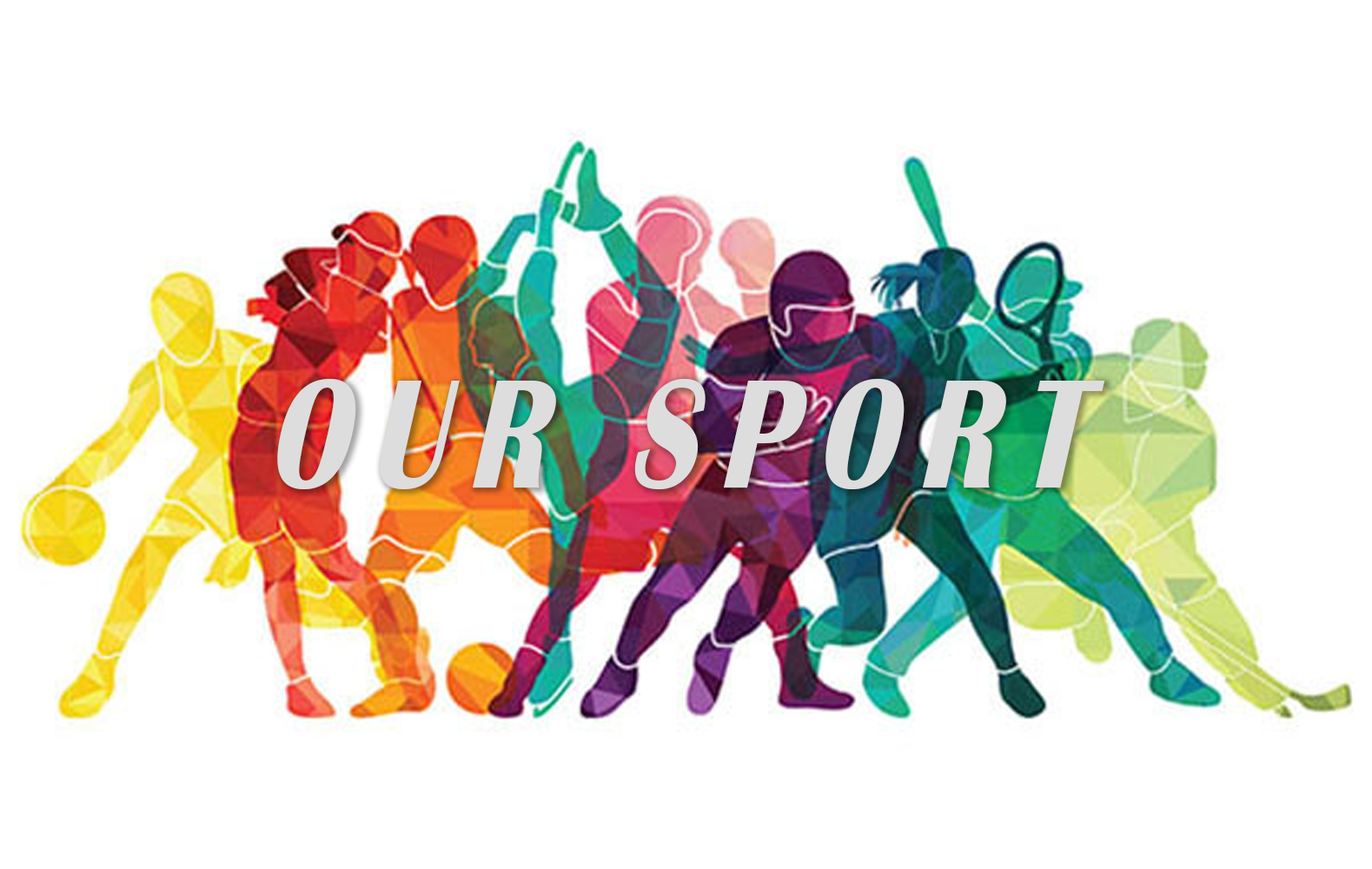
<style>
.page{position:relative;width:1372px;height:869px;background:#ffffff}
.page>*{position:absolute;margin:0}
.t1{font:164.5px "BritannicBold";letter-spacing:0.2em;color:#dddddd;text-transform:uppercase;scale:0.74 1}
</style>
<div class="page">
<p class="t1" style="left:277px;top:379px;width:828px;height:110px">OUR SPORT</p>
</div>
